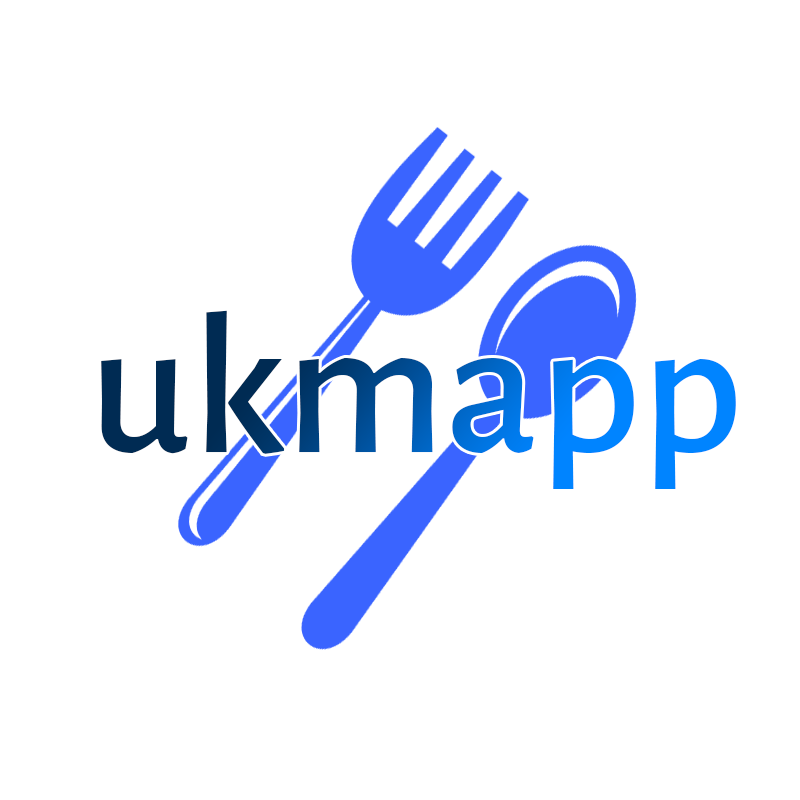
<style>
.page{position:relative;width:800px;height:800px;background:#ffffff}
.page>*{position:absolute;margin:0}
.t1{font:200px "AlegreyaSans-Medium"}
</style>
<div class="page">
<p class="t1" style="left:101px;top:310px;width:635px;height:179px">ukmapp</p>
</div>
